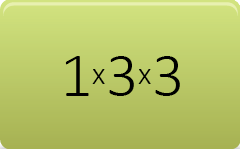
<style>
.page{position:relative;width:240px;height:149px}
.page>*{position:absolute;margin:0}
.t1{font:64px "Calibri-Light";color:#000000}
.t2{font:32px "Calibri-Light";color:#000000}
</style>
<div class="page">
<p class="t1" style="left:65px;top:56px;width:115px;height:40px">1<span class="t2">x</span>3<span class="t2">x</span>3</p>
</div>
